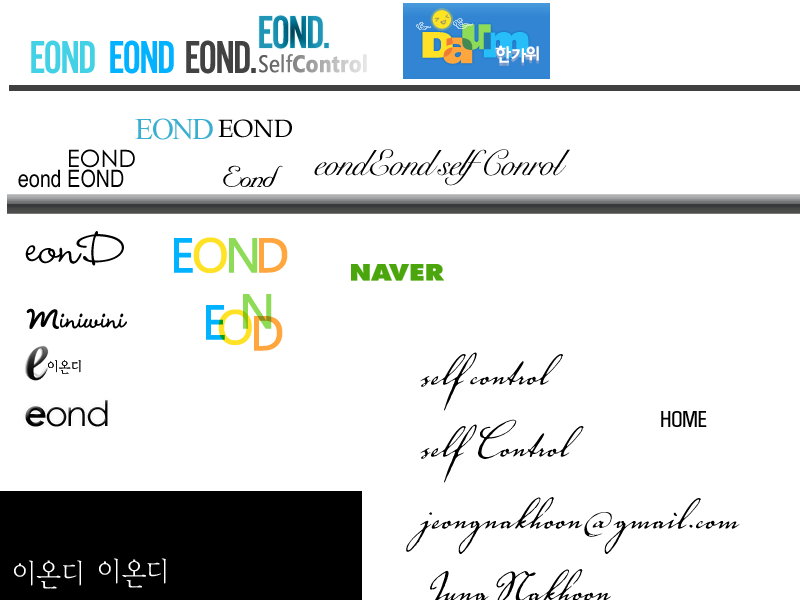
<style>
.page{position:relative;width:800px;height:600px;background:#ffffff}
.page>*{position:absolute;margin:0}
.t1{font:48px "AlternateGothicEFOP-NoTwo";letter-spacing:-0.05em;color:#1388a8}
.t2{font:48px "AlternateGothicEFOP-NoTwo";letter-spacing:-0.05em;color:#43d1e6}
.t3{font:48px "AlternateGothicEFOP-NoTwo";letter-spacing:-0.05em;color:#00b2ff}
.t4{font:48px "AlternateGothicEFOP-NoTwo";letter-spacing:-0.05em;color:#424242}
.t5{font:24px "SegoeUI-Bold";font-weight:bold;scale:0.85 1}
.t6{font:24px "SegoeUI-Regular";font-weight:bold;scale:0.85 1}
.t7{font:30px "TimesNewRomanPSMT";letter-spacing:-0.05em;color:#39aece}
.t8{font:25px "BookAntiqua";color:#000000}
.t9{font:24px "CenturyGothic";color:#000000}
.t10{font:36px "SnellRoundhand-Script";letter-spacing:-0.05em;color:#000000}
.t11{font:24px "ArialNarrow";color:#000000}
.t12{font:36px "NuptialScript";letter-spacing:-0.05em;color:#000000}
.t13{font:60px "WendyLP-Medium";color:#000000}
.t14{font:48px "SegoeUI-Regular";letter-spacing:-0.05em;color:#00b2ff;font-weight:bold}
.t15{font:48px "SegoeUI-Regular";letter-spacing:-0.05em;color:#ffe226;font-weight:bold}
.t16{font:48px "SegoeUI-Regular";letter-spacing:-0.05em;color:#8edb58;font-weight:bold}
.t17{font:48px "SegoeUI-Regular";letter-spacing:-0.05em;color:#ffa63f;font-weight:bold}
.t18{font:36px "WendyLP-Bold";color:#000000}
.t19{font:36px "WendyLP-Bold";color:#000000;font-weight:bold}
.t20{font:14.3px "YDIYMjO220";color:#000000;scale:0.91 1}
.t21{font:35px "CenturyGothic";letter-spacing:-0.05em;color:#000000}
.t22{font:36px "CenturyGothic-Bold";letter-spacing:-0.05em;color:#000000}
.t23{font:24px "UniversalCondensed-Regular";color:#000000}
.t24{font:30px "YDIYMjO220";color:#ffffff;scale:0.9 1}
</style>
<div class="page">
<p class="t1" style="left:259px;top:15px;width:70px;height:34px">EOND.</p>
<p class="t2" style="left:31px;top:40px;width:64px;height:34px">EOND</p>
<p class="t3" style="left:110px;top:40px;width:64px;height:34px">EOND</p>
<p class="t4" style="left:186px;top:40px;width:70px;height:34px">EOND.</p>
<p class="t5" style="left:259px;top:54px;width:108px;height:19px"><span class="t6">Self</span>Control</p>
<p class="t7" style="left:135px;top:118px;width:78px;height:22px">EOND</p>
<p class="t8" style="left:218px;top:119px;width:74px;height:19px">EOND</p>
<p class="t9" style="left:69px;top:149px;width:66px;height:19px">EOND</p>
<p class="t10" style="left:314px;top:149px;width:256px;height:37px">eondEond self Conrol</p>
<p class="t11" style="left:18px;top:169px;width:106px;height:19px">eond EOND</p>
<p class="t12" style="left:223px;top:165px;width:60px;height:22px">Eond</p>
<p class="t13" style="left:25px;top:231px;width:99px;height:35px">eonD</p>
<p class="t14" style="left:174px;top:238px;width:19px;height:35px">E</p>
<p class="t15" style="left:193px;top:237px;width:34px;height:36px">O</p>
<p class="t16" style="left:229px;top:238px;width:29px;height:35px">N</p>
<p class="t17" style="left:259px;top:238px;width:29px;height:35px">D</p>
<p class="t16" style="left:243px;top:294px;width:29px;height:35px">N</p>
<p class="t14" style="left:206px;top:305px;width:19px;height:35px">E</p>
<p class="t18" style="left:26px;top:308px;width:101px;height:21px"><span class="t19">M</span>iniwini</p>
<p class="t15" style="left:218px;top:309px;width:34px;height:36px">O</p>
<p class="t17" style="left:254px;top:316px;width:29px;height:35px">D</p>
<p class="t20" style="left:48px;top:360px;width:33px;height:14px">이온디</p>
<p class="t20" style="left:48px;top:360px;width:33px;height:14px">이온디</p>
<p class="t21" style="left:25px;top:400px;width:83px;height:27px"><span class="t22">e</span>ond</p>
<p class="t23" style="left:661px;top:411px;width:46px;height:16px">HOME</p>
<p class="t24" style="left:99px;top:558px;width:19px;height:26px">이</p>
<p class="t24" style="left:147px;top:558px;width:19px;height:26px">디</p>
<p class="t24" style="left:14px;top:560px;width:68px;height:29px">이온디</p>
<p class="t24" style="left:122px;top:559px;width:24px;height:29px">온</p>
</div>
